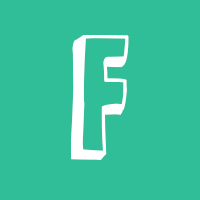
<style>
.page{position:relative;width:200px;height:200px;background:#2fbe97}
.page>*{position:absolute;margin:0}
.t1{font:200px "Bob'sBurgers";color:#ffffff}
</style>
<div class="page">
<p class="t1" style="left:71px;top:35px;width:58px;height:125px">F</p>
</div>
